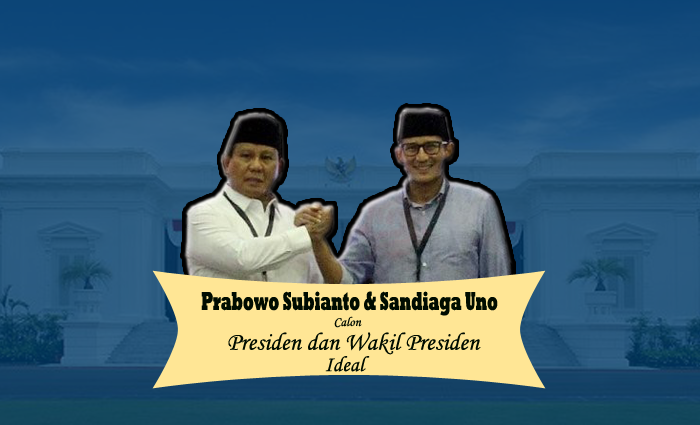
<style>
.page{position:relative;width:700px;height:425px}
.page>*{position:absolute;margin:0}
.t1{font:26.2px "Rockwell-ExtraBold";color:#000c00;scale:0.55 1}
.t2{font:13.4px "MonotypeCorsiva";color:#000c00}
.t3{font:24.9px "MonotypeCorsiva";color:#000c00}
.t4{font:21.8px "MonotypeCorsiva";color:#000c00}
</style>
<div class="page">
<p class="t1" style="left:201px;top:291px;width:297px;height:25px">Prabowo Subianto &amp; Sandiaga Uno</p>
<p class="t2" style="left:334px;top:316px;width:28px;height:12px">Calon</p>
<p class="t3" style="left:228px;top:332px;width:253px;height:23px">Presiden dan Wakil Presiden</p>
<p class="t4" style="left:325px;top:356px;width:45px;height:16px">Ideal</p>
</div>
